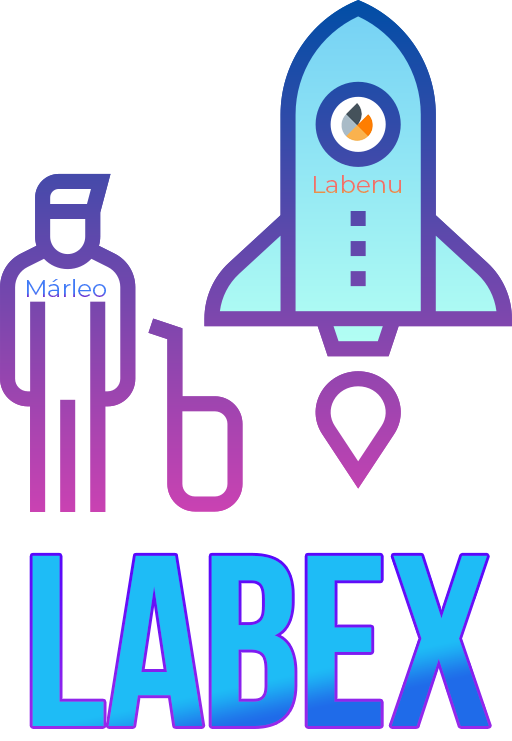
<style>
.page{position:relative;width:512px;height:741px;background:#ffffff}
.page>*{position:absolute;margin:0}
.t1{font:24.2px "Montserrat-Regular";color:#f17068}
.t2{font:24.2px "Montserrat-Regular";color:#3f7bf6}
.t3{font:242.9px "BebasNeueBold";color:#1ebcf6}
</style>
<div class="page">
<p class="t1" style="left:314px;top:175px;width:87px;height:18px">Labenu</p>
<p class="t2" style="left:27px;top:279px;width:79px;height:18px">Márleo</p>
<p class="t3" style="left:32px;top:555px;width:457px;height:171px">LabeX</p>
</div>
